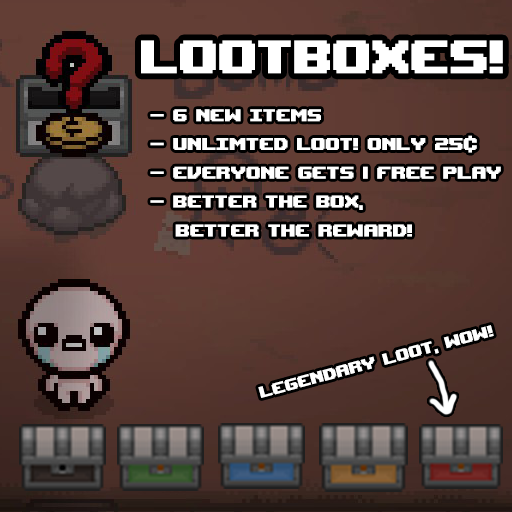
<style>
.page{position:relative;width:512px;height:512px}
.page>*{position:absolute;margin:0}
.t1{font:65.2px "UpheavalTT-BRK-";color:#ffffff}
.t2{font:24px "UpheavalTT-BRK-";color:#ffffff}
.t3{font:22.1px "UpheavalTT-BRK-";color:#ffffff}
</style>
<div class="page">
<p class="t1" style="left:141px;top:40px;width:362px;height:34px">Lootboxes!</p>
<p class="t2" style="left:150px;top:109px;width:351px;height:128px">- 6 new items<br>- Unlimted loot! Only 25¢<br>- Everyone gets 1 free play<br>- Better the box,<br>   Better the reward!</p>
<p class="t3" style="left:258px;top:325px;width:236px;height:73px;rotate:-15deg">Legendary Loot, wow!</p>
</div>
